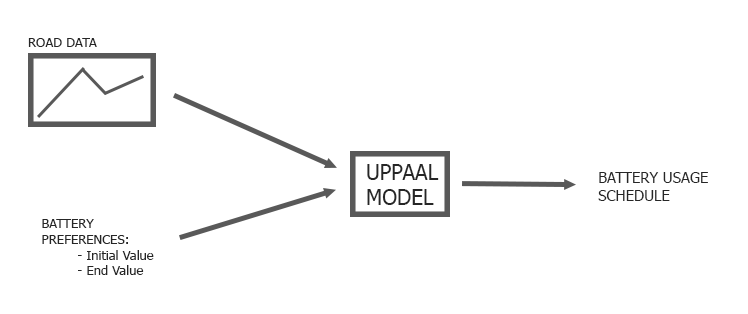
<style>
.page{position:relative;width:748px;height:314px;background:#ffffff}
.page>*{position:absolute;margin:0}
.t1{font:13.3px "Tahoma";color:#262626}
.t2{font:21px "Tahoma";color:#262626}
.t3{font:15px "Tahoma";color:#262626}
.t4{font:13px "Tahoma";color:#262626}
</style>
<div class="page">
<p class="t1" style="left:28px;top:38px;width:69px;height:9px">ROAD DATA</p>
<p class="t2" style="left:367px;top:164px;width:72px;height:41px">UPPAAL<br>MODEL</p>
<p class="t3" style="left:598px;top:172px;width:110px;height:29px">BATTERY USAGE<br>SCHEDULE</p>
<p class="t4" style="left:42px;top:219px;width:112px;height:56px">BATTERY<br>PREFERENCES:<br> - Initial Value<br> - End Value</p>
</div>
